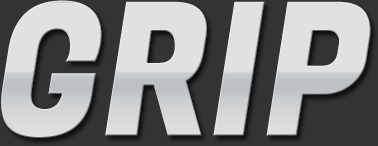
<style>
.page{position:relative;width:378px;height:146px;background:#333333}
.page>*{position:absolute;margin:0}
.t1{font:185.2px "FugazOne-Regular";color:#dfdfdf;scale:0.89 1}
</style>
<div class="page">
<p class="t1" style="left:1px;top:0px;width:370px;height:138px">GRIP</p>
</div>
